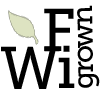
<style>
.page{position:relative;width:100px;height:100px;background:#ffffff}
.page>*{position:absolute;margin:0}
.t1{font:29px "MuseoSlab-500";letter-spacing:-0.08em;color:#000000}
.t2{font:29px "MuseoSlab-500";color:#000000}
.t3{font:60px "MuseoSlab-500";color:#000000}
</style>
<div class="page">
<p class="t1" style="left:77px;top:5px;width:23px;height:83px;rotate:-91deg">grow<span class="t2">n</span></p>
<p class="t3" style="left:44px;top:8px;width:30px;height:43px">F</p>
<p class="t3" style="left:1px;top:46px;width:59px;height:43px">W</p>
<p class="t3" style="left:58px;top:45px;width:17px;height:43px">i</p>
</div>
